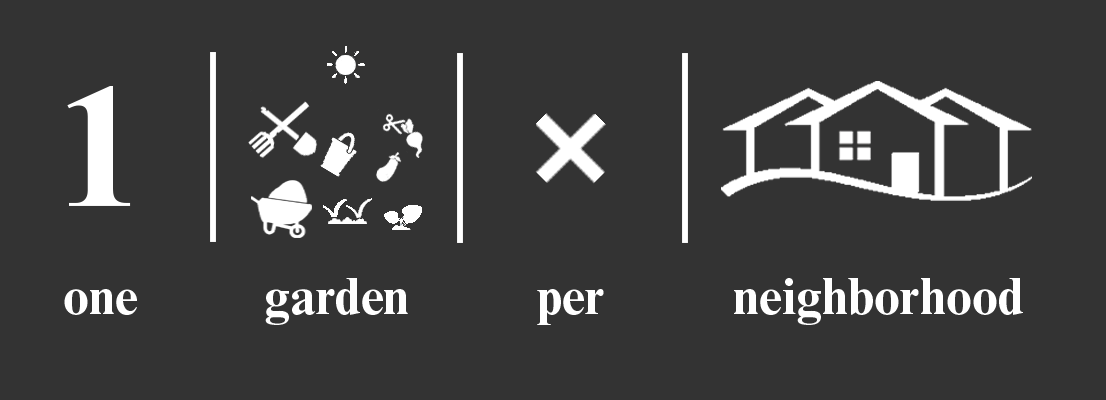
<style>
.page{position:relative;width:1106px;height:400px;background:#333333}
.page>*{position:absolute;margin:0}
.t1{font:172px "TimesNewRomanMTStd-Bold";color:#ffffff}
.t2{font:52px "TimesNewRomanMTStd-Bold";color:#ffffff}
</style>
<div class="page">
<p class="t1" style="left:67px;top:86px;width:64px;height:120px">1</p>
<p class="t2" style="left:265px;top:278px;width:143px;height:47px">garden</p>
<p class="t2" style="left:734px;top:278px;width:289px;height:47px">neighborhood</p>
<p class="t2" style="left:64px;top:289px;width:73px;height:26px">one</p>
<p class="t2" style="left:537px;top:289px;width:67px;height:36px">per</p>
</div>
